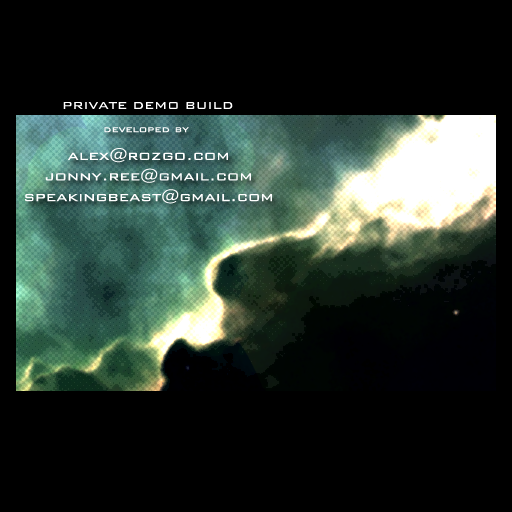
<style>
.page{position:relative;width:512px;height:512px;background:#000000}
.page>*{position:absolute;margin:0}
.t1{font:13.2px "BankGothic-Light";color:#ffffff;scale:1.09 1}
.t2{font:11px "BankGothic-Light";color:#ffffff;scale:1.09 1}
.t3{font:16.5px "BankGothic-Light";color:#ffffff;scale:1.09 1}
</style>
<div class="page">
<p class="t1" style="left:63px;top:102px;width:170px;height:7px">PRIVATE DEMO BUILD</p>
<p class="t2" style="left:104px;top:127px;width:85px;height:6px">developed by</p>
<p class="t3" style="left:68px;top:148px;width:160px;height:15px">alex@rozgo.com</p>
<p class="t3" style="left:45px;top:168px;width:206px;height:15px">jonny.ree@gmail.com</p>
<p class="t3" style="left:25px;top:189px;width:247px;height:15px">speakingbeast@gmail.com</p>
</div>
